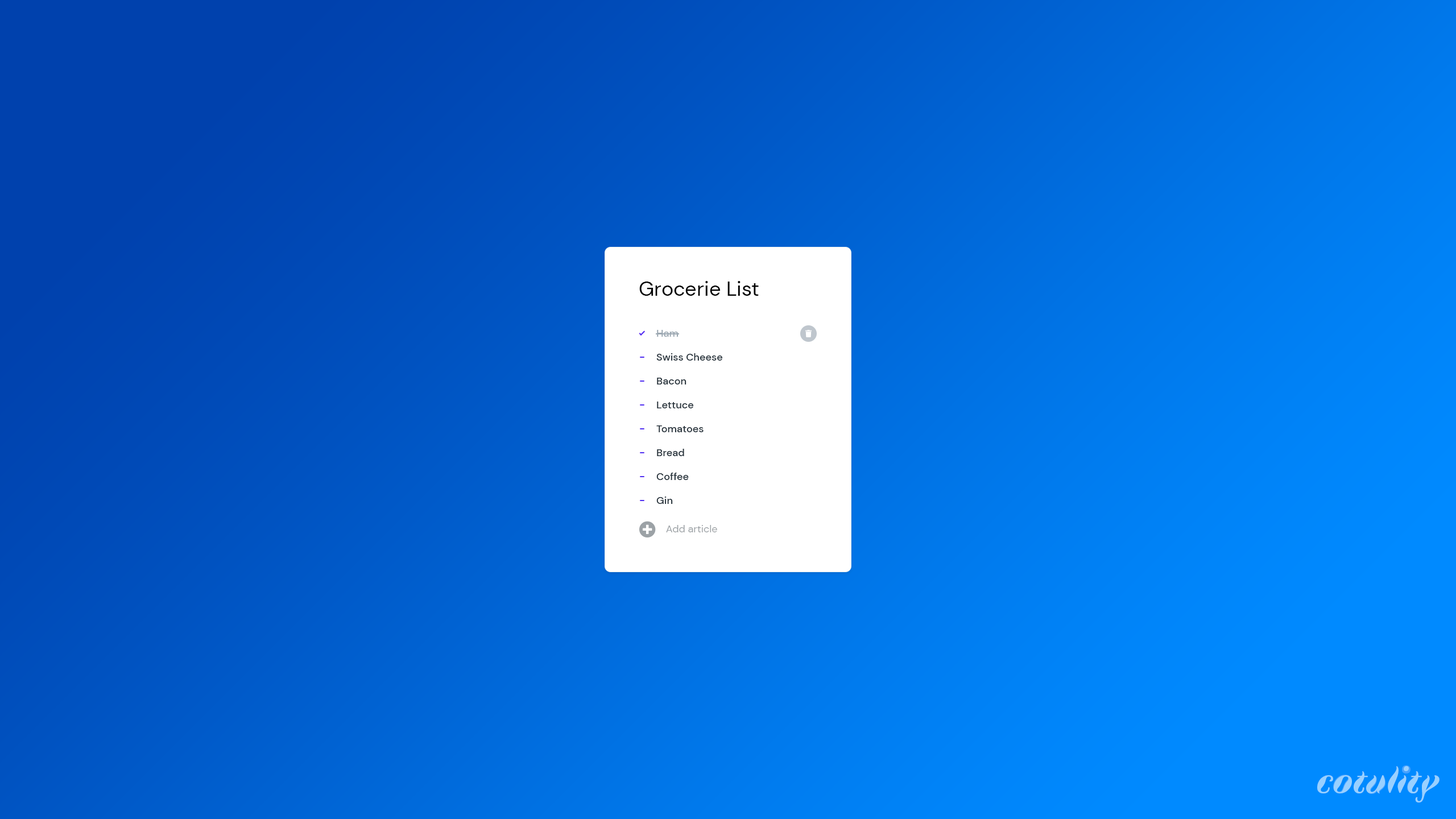
<style>
.page{position:relative;width:1456px;height:819px}
.page>*{position:absolute;margin:0}
.t1{font:20.5px "DMSans-Regular";color:#000000}
.t2{font:10.2px/23.9px "DMSans-Medium";color:#28343d}
.t3{font:10.2px/23.9px "DMSans-Medium";color:#9ca8b2}
.t4{font:10.2px "DMSans-Regular";color:#9ca2a6}
.t5{font:36.9px "Faune-DisplayBoldItalic";color:#99d0ff}
.t6{font:16.6px "Faune-DisplayBlack"}
</style>
<div class="page">
<p class="t1" style="left:639px;top:281px;width:120px;height:15px">Grocerie List</p>
<p class="t2" style="left:656px;top:330px;width:67px;height:174px"><span class="t3">Ham<br></span>Swiss Cheese<br>Bacon<br>Lettuce<br>Tomatoes<br>Bread<br>Coffee<br>Gin</p>
<p class="t4" style="left:666px;top:525px;width:51px;height:7px">Add article</p>
<p class="t5" style="left:1317px;top:766px;width:122px;height:36px">cotulity</p>
<p class="t6" style="left:1402px;top:765px;width:8px;height:8px;rotate:90deg">o</p>
<p class="t5" style="left:1407px;top:771px;width:14px;height:22px">t</p>
<p class="t5" style="left:1333px;top:775px;width:18px;height:18px">o</p>
<p class="t5" style="left:1367px;top:776px;width:19px;height:18px">u</p>
</div>
